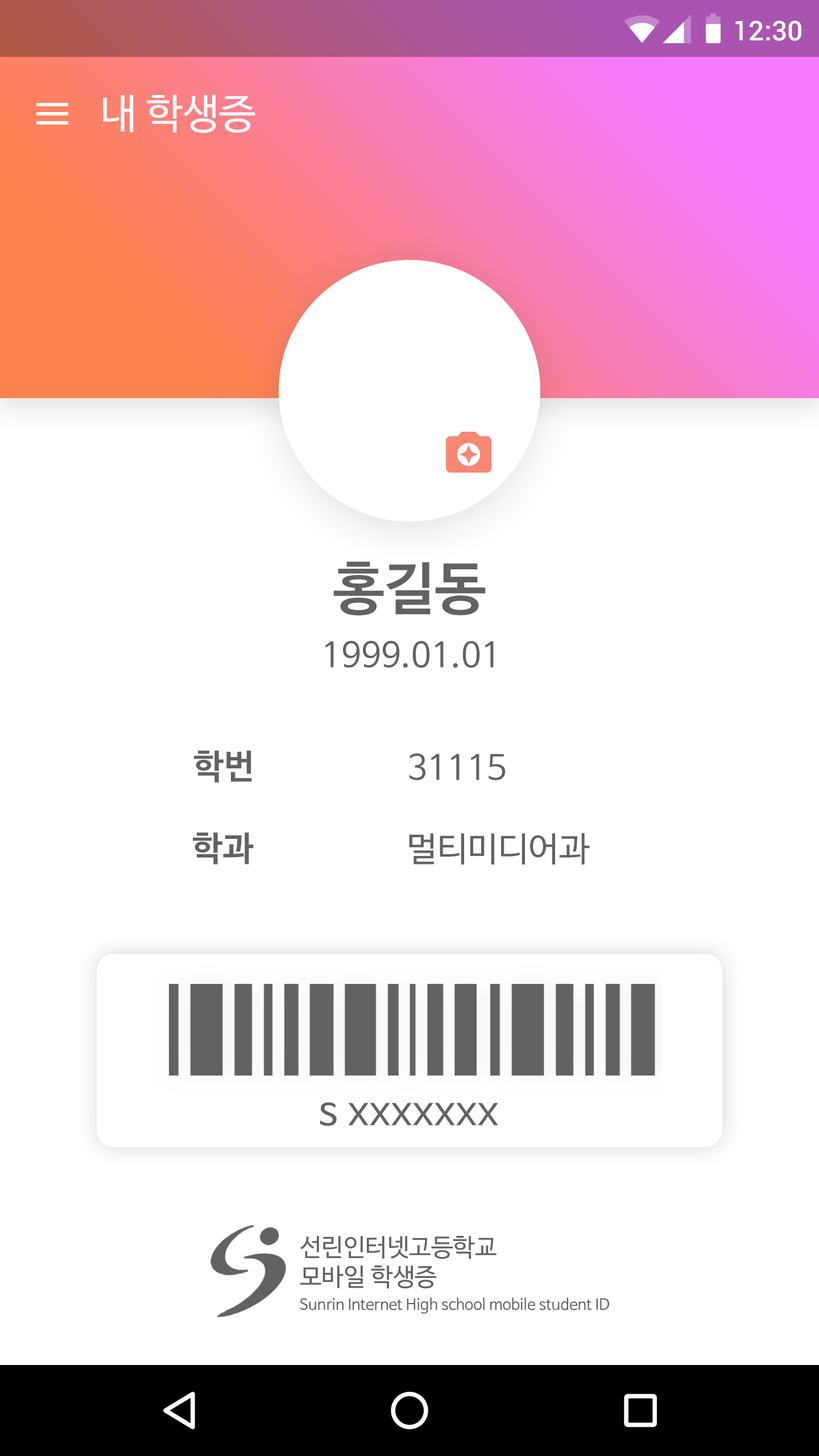
<style>
.page{position:relative;width:819px;height:1456px;background:#ffffff}
.page>*{position:absolute;margin:0}
.t1{font:27.3px "Roboto-Medium";color:#ffffff}
.t2{font:40.9px "NanumBarunGothic";color:#ffffff}
.t3{font:56.9px "NanumBarunGothicBold";color:#626262}
.t4{font:34.1px "NanumBarunGothic";color:#626262}
.t5{font:34.1px "NanumBarunGothicBold";color:#626262}
.t6{font:40.9px "NanumBarunGothic";color:#626262}
.t7{font:24.6px "NanumBarunGothic";color:#626262}
.t8{font:15.1px "NanumBarunGothic";color:#626262}
</style>
<div class="page">
<p class="t1" style="left:735px;top:20px;width:66px;height:21px">12:30</p>
<p class="t2" style="left:103px;top:94px;width:152px;height:39px">내 학생증</p>
<p class="t3" style="left:333px;top:561px;width:153px;height:54px">홍길동</p>
<p class="t4" style="left:325px;top:640px;width:169px;height:28px">1999.01.01</p>
<p class="t5" style="left:194px;top:750px;width:58px;height:33px">학번</p>
<p class="t4" style="left:409px;top:753px;width:97px;height:27px">31115</p>
<p class="t5" style="left:193px;top:832px;width:61px;height:32px">학과</p>
<p class="t4" style="left:409px;top:833px;width:181px;height:31px">멀티미디어과</p>
<p class="t6" style="left:320px;top:1102px;width:178px;height:24px">s xxxxxxx</p>
<p class="t7" style="left:300px;top:1236px;width:197px;height:53px">선린인터넷고등학교<br>모바일 학생증</p>
<p class="t8" style="left:300px;top:1297px;width:309px;height:17px">Sunrin Internet High school mobile student ID</p>
</div>
